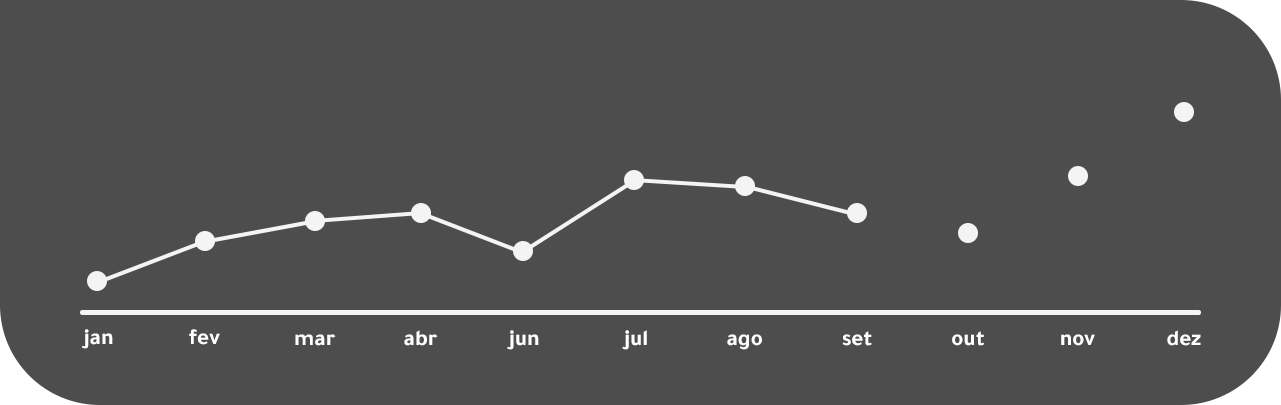
<style>
.page{position:relative;width:1281px;height:405px;background:#4d4d4d}
.page>*{position:absolute;margin:0}
.t1{font:22.8px "Tajawal-Bold";color:#ffffff}
.t2{font:22.7px "Tajawal-Bold";color:#ffffff}
</style>
<div class="page">
<p class="t1" style="left:81px;top:329px;width:32px;height:20px">jan</p>
<p class="t1" style="left:189px;top:329px;width:31px;height:16px">fev</p>
<p class="t2" style="left:295px;top:334px;width:41px;height:12px">mar</p>
<p class="t2" style="left:404px;top:330px;width:34px;height:16px">abr</p>
<p class="t2" style="left:507px;top:330px;width:32px;height:20px">jun</p>
<p class="t2" style="left:622px;top:330px;width:25px;height:20px">jul</p>
<p class="t2" style="left:727px;top:334px;width:35px;height:16px">ago</p>
<p class="t2" style="left:842px;top:331px;width:30px;height:15px">set</p>
<p class="t2" style="left:952px;top:331px;width:33px;height:15px">out</p>
<p class="t2" style="left:1061px;top:334px;width:34px;height:12px">nov</p>
<p class="t2" style="left:1167px;top:330px;width:34px;height:16px">dez</p>
</div>
